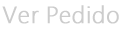
<style>
.page{position:relative;width:128px;height:33px;background:#ffffff}
.page>*{position:absolute;margin:0}
.t1{font:24px "Segan-Light";color:#cccccc;font-weight:bold}
</style>
<div class="page">
<p class="t1" style="left:2px;top:5px;width:117px;height:19px">Ver Pedido</p>
</div>
